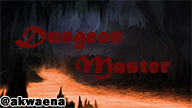
<style>
.page{position:relative;width:192px;height:108px}
.page>*{position:absolute;margin:0}
.t1{font:25px "MaturaMTScriptCapitals";color:#660909;font-weight:bold}
.t2{font:12.5px "FranklinGothic-Heavy";color:#000000;font-weight:bold}
</style>
<div class="page">
<p class="t1" style="left:15px;top:26px;width:155px;height:53px;text-align:center">Dungeon<br>   Master</p>
<p class="t2" style="left:0px;top:96px;width:65px;height:10px">@akwaena</p>
</div>
